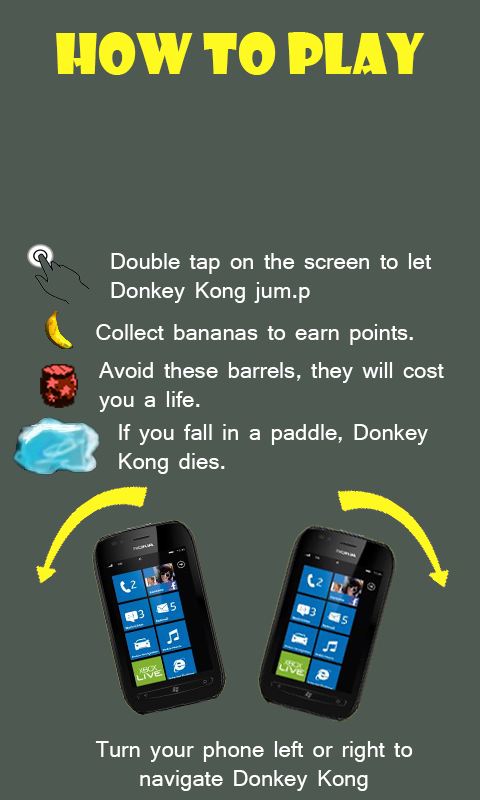
<style>
.page{position:relative;width:480px;height:800px;background:#4e5951}
.page>*{position:absolute;margin:0}
.t1{font:55px "ShowcardGothic-Reg";color:#fff922}
.t2{font:24px "Shruti";color:#ffffff}
</style>
<div class="page">
<p class="t1" style="left:56px;top:32px;width:369px;height:43px">How to Play</p>
<p class="t2" style="left:111px;top:253px;width:321px;height:50px">Double tap on the screen to let<br>Donkey Kong jum.p</p>
<p class="t2" style="left:96px;top:324px;width:317px;height:21px">Collect bananas to earn points.</p>
<p class="t2" style="left:99px;top:362px;width:345px;height:50px">Avoid these barrels, they will cost you a life.</p>
<p class="t2" style="left:119px;top:424px;width:309px;height:50px">If you fall in a paddle, Donkey Kong dies.</p>
<p class="t2" style="left:95px;top:741px;width:318px;height:50px;text-align:center">Turn your phone left or right to<br>navigate Donkey Kong</p>
</div>
